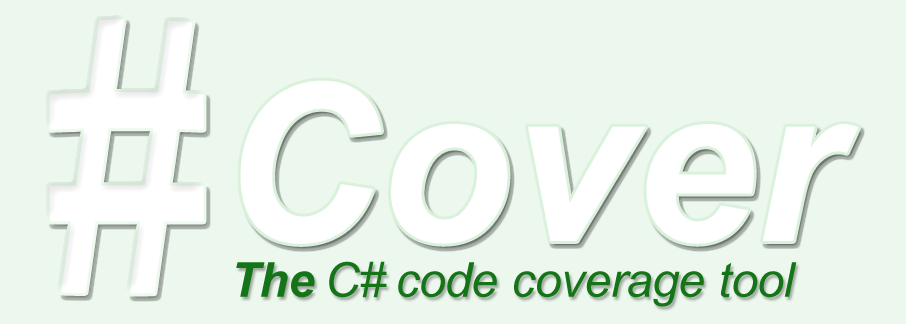
<style>
.page{position:relative;width:906px;height:324px;background:#ecf8ed}
.page>*{position:absolute;margin:0}
.t1{font:240px "Impact";letter-spacing:0.01em;color:#ffffff}
.t2{font:220px "Arial-BoldItalicMT";letter-spacing:0.01em;color:#ffffff}
.t3{font:48px "Arial-ItalicMT";color:#157418}
.t4{font:48px "Arial-BoldItalicMT";color:#157418;text-transform:uppercase}
.t5{font:48px "Arial-BoldItalicMT";color:#157418}
</style>
<div class="page">
<p class="t1" style="left:49px;top:19px;width:155px;height:275px">#</p>
<p class="t2" style="left:240px;top:80px;width:619px;height:164px">Cover</p>
<p class="t3" style="left:236px;top:261px;width:561px;height:46px"><span class="t4">T</span><span class="t5">he </span>C# code coverage tool</p>
</div>
